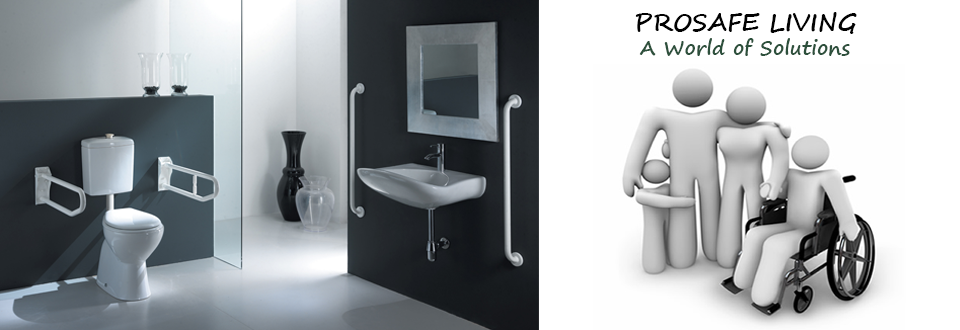
<style>
.page{position:relative;width:960px;height:330px}
.page>*{position:absolute;margin:0}
.t1{font:20px "SegoePrint-Bold";color:#2d503c}
.t2{font:24px "SegoeScript-Bold";color:#020202}
</style>
<div class="page">
<p class="t1" style="left:635px;top:12px;width:222px;height:44px;text-align:center"><span class="t2">PROSAFE LIVING<br></span>A World of Solutions</p>
</div>
